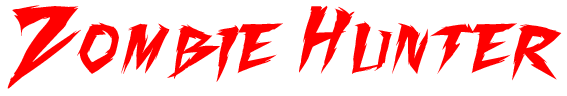
<style>
.page{position:relative;width:567px;height:96px;background:#ffffff}
.page>*{position:absolute;margin:0}
.t1{font:75px "FightingSpiritturbo";color:#ff0000}
</style>
<div class="page">
<p class="t1" style="left:7px;top:5px;width:555px;height:84px">Zombie Hunter</p>
</div>
